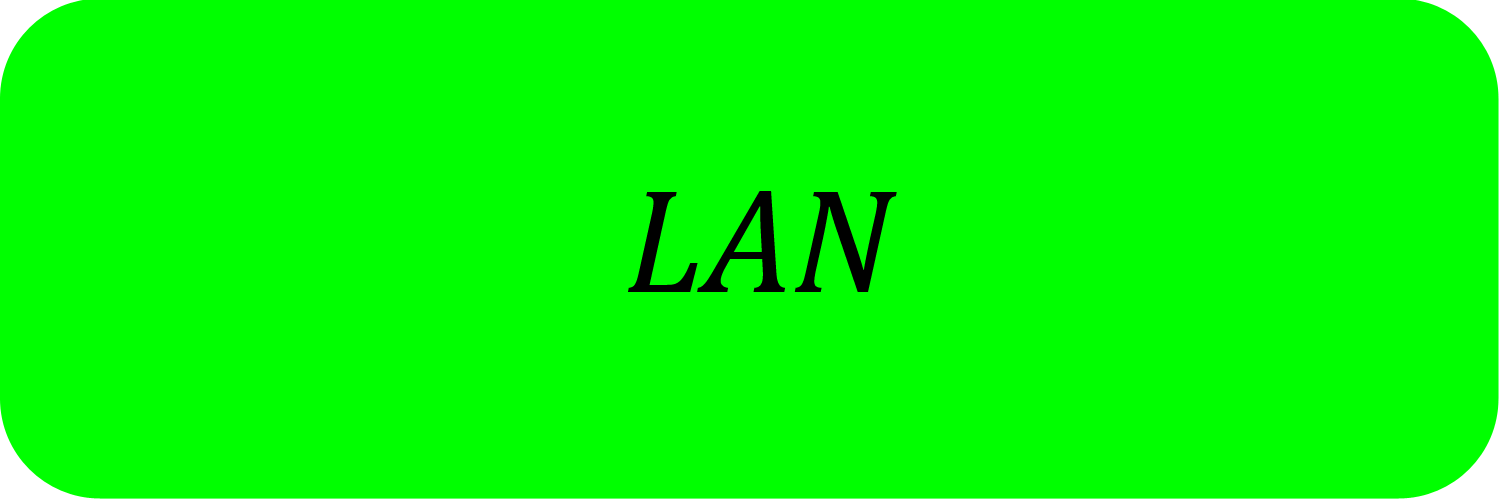
<style>
.page{position:relative;width:1500px;height:500px;background:#00ff00}
.page>*{position:absolute;margin:0}
.t1{font:150px "Cambria-Italic";color:#000000}
</style>
<div class="page">
<p class="t1" style="left:628px;top:191px;width:269px;height:101px">LAN</p>
</div>
